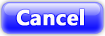
<style>
.page{position:relative;width:105px;height:36px}
.page>*{position:absolute;margin:0}
.t1{font:21.4px "SegoeUI-Bold";color:#fdfafa;font-weight:bold}
</style>
<div class="page">
<p class="t1" style="left:16px;top:9px;width:68px;height:17px">Cancel</p>
</div>
